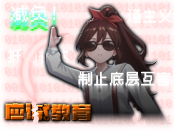
<style>
.page{position:relative;width:174px;height:140px}
.page>*{position:absolute;margin:0}
.t1{font:19.5px "HYPixel-11px-U";color:#ffffff}
.t2{font:15.7px "HYPixel-11px-U";color:#ffffff}
</style>
<div class="page">
<p class="t1" style="left:11px;top:4px;width:45px;height:18px">减负！</p>
<p class="t2" style="left:78px;top:71px;width:93px;height:15px">制止底层互害</p>
</div>
